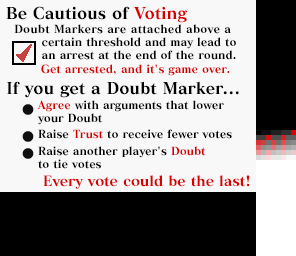
<style>
.page{position:relative;width:296px;height:256px;background:#f8f8f8}
.page>*{position:absolute;margin:0}
.t1{font:16px "MatissePro-EB";letter-spacing:-0.01em;color:#000000}
.t2{font:16px "MatissePro-EB";letter-spacing:-0.01em;color:#d80000}
.t3{font:11px/13px "MatissePro-EB";letter-spacing:-0.01em;color:#000000}
.t4{font:11px/13px "MatissePro-EB";letter-spacing:0.01em;color:#000000}
.t5{font:11px "MatissePro-EB";letter-spacing:-0.01em;color:#d80000}
.t6{font:11px/14px "MatissePro-EB";letter-spacing:-0.01em;color:#000000}
.t7{font:11px/13px "MatissePro-EB";letter-spacing:-0.01em;color:#d80000}
.t8{font:11px/14px "MatissePro-EB";letter-spacing:-0.025em;color:#000000}
.t9{font:11px/14px "MatissePro-EB";letter-spacing:-0.01em;color:#d80000}
.t10{font:14px "MatissePro-EB";letter-spacing:-0.01em;color:#d80000}
</style>
<div class="page">
<p class="t1" style="left:6px;top:6px;width:182px;height:17px">Be Cautious of <span class="t2">Voting</span></p>
<p class="t3" style="left:14px;top:24px;width:222px;height:36px"><span class="t4">  Doubt Markers are attached above a<br> </span>certain threshold and may lead to<br> an arrest at the end of the round.</p>
<p class="t5" style="left:41px;top:64px;width:189px;height:12px">Get arrested, and it's game over.</p>
<p class="t1" style="left:6px;top:81px;width:233px;height:17px">If you get a Doubt Marker...</p>
<p class="t6" style="left:37px;top:100px;width:195px;height:69px"><span class="t7">Agree</span><span class="t3"> with </span><span class="t8">arguments</span><span class="t3"> that lower<br>your Doubt<br> <br></span>Raise <span class="t9">Trust</span> to receive fewer votes<br> <br><span class="t3">Raise another player's </span><span class="t7">Doubt<br></span><span class="t3">to tie votes</span></p>
<p class="t10" style="left:43px;top:175px;width:207px;height:14px">Every vote could be the last!</p>
</div>
